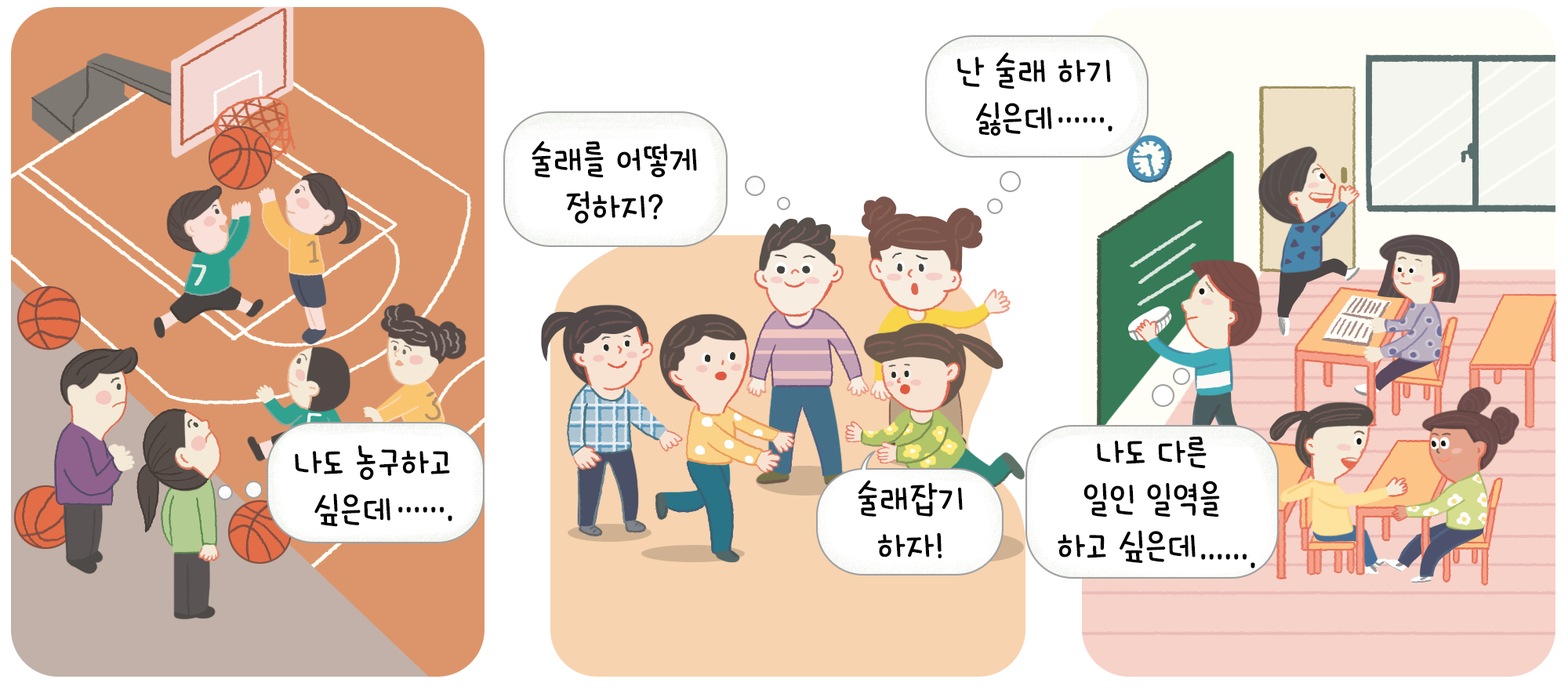
<style>
.page{position:relative;width:1568px;height:690px;background:#ffffff}
.page>*{position:absolute;margin:0}
.t1{font:9.4px "HakgyoansimNadeuriOTF-L";color:#000000}
.t2{font:39.2px "HakgyoansimNadeuriOTF-L";color:#000000}
</style>
<div class="page">
<p class="t1" style="left:957px;top:53px;width:154px;height:83px;text-align:center">난 술래 하기<br>싫은데</p>
<p class="t1" style="left:532px;top:141px;width:165px;height:82px;text-align:center">술래를 어떻게<br>정하지?</p>
<p class="t2" style="left:1058px;top:436px;width:162px;height:127px;text-align:center">나도 다른<br>일인 일역을<br>하고 싶은데</p>
<p class="t1" style="left:295px;top:445px;width:155px;height:82px;text-align:center">나도 농구하고<br>싶은데</p>
<p class="t1" style="left:858px;top:480px;width:105px;height:79px;text-align:center">술래잡기<br>하자!</p>
</div>
